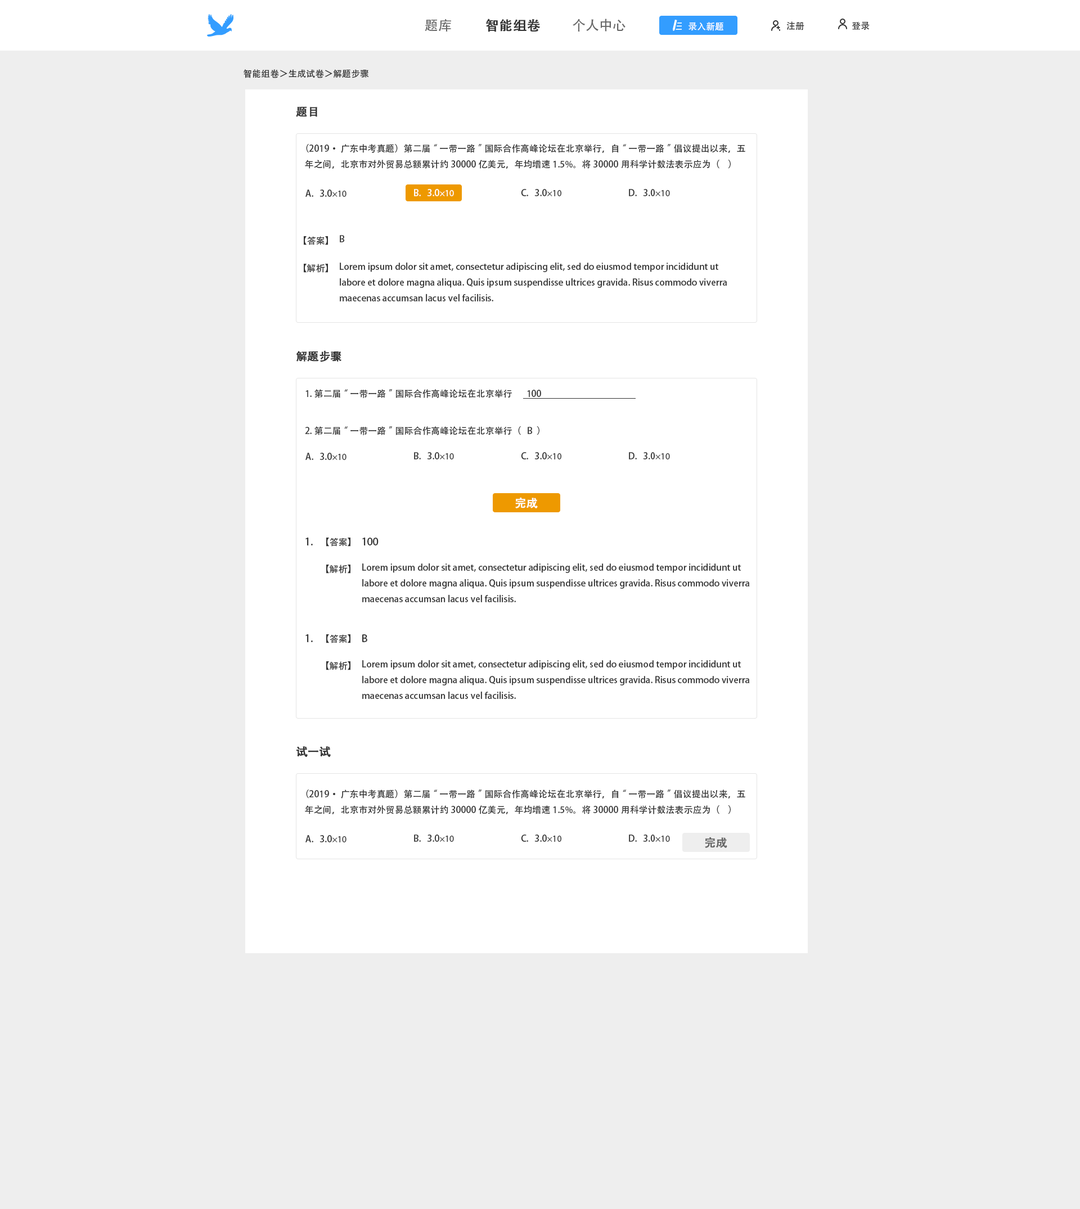
<style>
.page{position:relative;width:1080px;height:1209px;background:#eeeeee}
.page>*{position:absolute;margin:0}
.t1{font:13.5px "AdobeHeitiStd-Regular";color:#666666}
.t2{font:13.5px "AdobeHeitiStd-Regular";color:#333333;font-weight:bold}
.t3{font:9px "AdobeHeitiStd-Regular";color:#ffffff}
.t4{font:9px "AdobeHeitiStd-Regular";color:#333333}
.t5{font:11.2px "AdobeHeitiStd-Regular";color:#333333;font-weight:bold}
.t6{font:9px "MyriadPro-Regular";color:#333333}
.t7{font:9px "MyriadPro-Regular";color:#ffffff}
.t8{font:11.2px "AdobeHeitiStd-Regular";color:#ffffff;font-weight:bold}
.t9{font:10.1px "AdobeHeitiStd-Regular";color:#333333}
.t10{font:11.2px "AdobeHeitiStd-Regular";color:#666666;font-weight:bold}
</style>
<div class="page">
<p class="t1" style="left:425px;top:19px;width:26px;height:13px">题库</p>
<p class="t2" style="left:486px;top:19px;width:54px;height:13px">智能组卷</p>
<p class="t1" style="left:573px;top:19px;width:53px;height:13px">个人中心</p>
<p class="t3" style="left:688px;top:22px;width:35px;height:9px">录入新题</p>
<p class="t4" style="left:786px;top:21px;width:18px;height:9px">注册</p>
<p class="t4" style="left:852px;top:21px;width:18px;height:9px">登录</p>
<p class="t4" style="left:244px;top:69px;width:125px;height:9px">智能组卷＞生成试卷＞解题步骤</p>
<p class="t5" style="left:296px;top:106px;width:21px;height:11px">题目</p>
<p class="t4" style="left:305px;top:144px;width:440px;height:25px">（2019·广东中考真题）第二届“一带一路”国际合作高峰论坛在北京举行，自“一带一路”倡议提出以来，五年之间，北京市对外贸易总额累计约30000亿美元，年均增速1.5%。将30000用科学计数法表示应为（    ）</p>
<p class="t4" style="left:305px;top:190px;width:41px;height:7px">A.   3.0<span class="t6">×10</span></p>
<p class="t3" style="left:414px;top:189px;width:40px;height:7px">B.   3.0<span class="t7">×10</span></p>
<p class="t4" style="left:521px;top:189px;width:40px;height:7px">C.   3.0<span class="t6">×10</span></p>
<p class="t4" style="left:629px;top:189px;width:41px;height:7px">D.   3.0<span class="t6">×10</span></p>
<p class="t4" style="left:304px;top:236px;width:24px;height:9px">【答案】</p>
<p class="t4" style="left:340px;top:235px;width:5px;height:7px">B</p>
<p class="t4" style="left:304px;top:264px;width:24px;height:9px">【解析】</p>
<p class="t4" style="left:340px;top:262px;width:387px;height:40px">Lorem ipsum dolor sit amet, consectetur adipiscing elit, sed do eiusmod tempor incididunt ut labore et dolore magna aliqua. Quis ipsum suspendisse ultrices gravida. Risus commodo viverra maecenas accumsan lacus vel facilisis.</p>
<p class="t5" style="left:296px;top:350px;width:45px;height:12px">解题步骤</p>
<p class="t4" style="left:305px;top:389px;width:207px;height:9px">1.第二届“一带一路”国际合作高峰论坛在北京举行</p>
<p class="t4" style="left:527px;top:390px;width:14px;height:7px">100</p>
<p class="t4" style="left:305px;top:426px;width:234px;height:9px">2.第二届“一带一路”国际合作高峰论坛在北京举行（   B  ）</p>
<p class="t4" style="left:305px;top:453px;width:41px;height:7px">A.   3.0<span class="t6">×10</span></p>
<p class="t4" style="left:414px;top:452px;width:40px;height:8px">B.   3.0<span class="t6">×10</span></p>
<p class="t4" style="left:521px;top:452px;width:40px;height:8px">C.   3.0<span class="t6">×10</span></p>
<p class="t4" style="left:629px;top:452px;width:41px;height:8px">D.   3.0<span class="t6">×10</span></p>
<p class="t8" style="left:515px;top:497px;width:23px;height:11px">完成</p>
<p class="t9" style="left:305px;top:538px;width:8px;height:8px">1.</p>
<p class="t4" style="left:326px;top:538px;width:24px;height:9px">【答案】</p>
<p class="t9" style="left:362px;top:538px;width:17px;height:8px">100</p>
<p class="t4" style="left:326px;top:565px;width:24px;height:9px">【解析】</p>
<p class="t4" style="left:362px;top:563px;width:388px;height:39px">Lorem ipsum dolor sit amet, consectetur adipiscing elit, sed do eiusmod tempor incididunt ut labore et dolore magna aliqua. Quis ipsum suspendisse ultrices gravida. Risus commodo viverra maecenas accumsan lacus vel facilisis.</p>
<p class="t9" style="left:305px;top:634px;width:8px;height:8px">1.</p>
<p class="t4" style="left:326px;top:634px;width:24px;height:10px">【答案】</p>
<p class="t9" style="left:362px;top:634px;width:5px;height:8px">B</p>
<p class="t4" style="left:326px;top:662px;width:24px;height:8px">【解析】</p>
<p class="t4" style="left:362px;top:660px;width:388px;height:39px">Lorem ipsum dolor sit amet, consectetur adipiscing elit, sed do eiusmod tempor incididunt ut labore et dolore magna aliqua. Quis ipsum suspendisse ultrices gravida. Risus commodo viverra maecenas accumsan lacus vel facilisis.</p>
<p class="t5" style="left:296px;top:746px;width:35px;height:11px">试一试</p>
<p class="t4" style="left:305px;top:790px;width:440px;height:24px">（2019·广东中考真题）第二届“一带一路”国际合作高峰论坛在北京举行，自“一带一路”倡议提出以来，五年之间，北京市对外贸易总额累计约30000亿美元，年均增速1.5%。将30000用科学计数法表示应为（    ）</p>
<p class="t4" style="left:305px;top:835px;width:41px;height:8px">A.   3.0<span class="t6">×10</span></p>
<p class="t4" style="left:414px;top:835px;width:40px;height:7px">B.   3.0<span class="t6">×10</span></p>
<p class="t4" style="left:521px;top:835px;width:40px;height:7px">C.   3.0<span class="t6">×10</span></p>
<p class="t4" style="left:629px;top:835px;width:41px;height:7px">D.   3.0<span class="t6">×10</span></p>
<p class="t10" style="left:705px;top:837px;width:22px;height:11px">完成</p>
</div>
